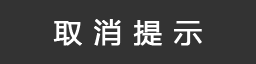
<style>
.page{position:relative;width:256px;height:64px;background:#333333}
.page>*{position:absolute;margin:0}
.t1{font:28px "MicrosoftYaHei";letter-spacing:0.4em;color:#ffffff;font-weight:bold}
</style>
<div class="page">
<p class="t1" style="left:53px;top:19px;width:149px;height:27px">取消提示</p>
</div>
